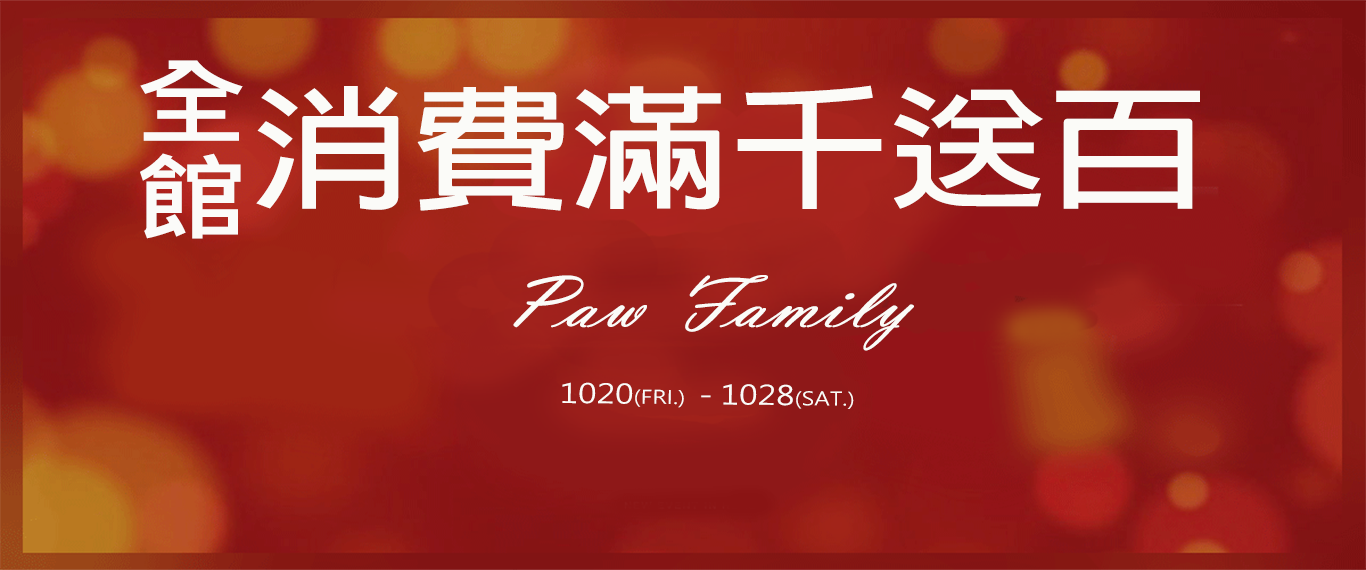
<style>
.page{position:relative;width:1366px;height:570px}
.page>*{position:absolute;margin:0}
.t1{font:95.8px/13.3px "MicrosoftJhengHeiBold";color:#fbfbf9;scale:1.2 1}
.t2{font:133px "AdobeFanHeitiStd-Bold";color:#fbfbf8;scale:1.2 1}
.t3{font:74.8px "VladimirScript";color:#fbfbf8;font-weight:bold;scale:1.2 1}
.t4{font:18.6px "MicrosoftJhengHeiRegular";color:#fbfbf8;scale:1.2 1}
.t5{font:26.6px "MicrosoftJhengHeiRegular";color:#fbfbf8;scale:1.2 1}
</style>
<div class="page">
<p class="t1" style="left:140px;top:60px;width:103px;height:179px;text-align:center">全館</p>
<p class="t2" style="left:256px;top:85px;width:944px;height:126px">消費滿千送百</p>
<p class="t3" style="left:513px;top:275px;width:401px;height:76px">Paw Family</p>
<p class="t4" style="left:562px;top:382px;width:292px;height:27px;rotate:1deg"><span class="t5">1020</span>(FRI.) <span class="t5"> - 1028</span>(SAT.)</p>
</div>
